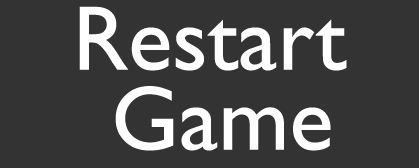
<style>
.page{position:relative;width:419px;height:168px;background:#333333}
.page>*{position:absolute;margin:0}
.t1{font:92px/80px "GillSansMT";color:#ffffff}
</style>
<div class="page">
<p class="t1" style="left:79px;top:6px;width:268px;height:145px;text-align:center">Restart<br> Game</p>
</div>
